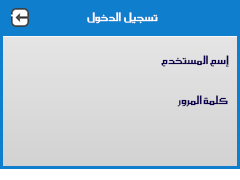
<style>
.page{position:relative;width:240px;height:180px;background:#0e7ecd}
.page>*{position:absolute;margin:0}
.t1{font:14px "SC_KHALID";color:#ffffff}
.t2{font:14px "SC_KHALID";color:#0d004c}
</style>
<div class="page">
<p class="t1" style="left:87px;top:12px;width:71px;height:12px">تسجيل  الدخول</p>
<p class="t2" style="left:161px;top:55px;width:68px;height:12px">إسم المستخدم</p>
<p class="t2" style="left:177px;top:95px;width:51px;height:12px">كلمة المرور</p>
</div>
